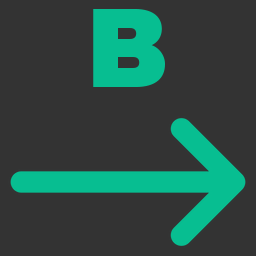
<style>
.page{position:relative;width:256px;height:256px;background:#333333}
.page>*{position:absolute;margin:0}
.t1{font:109.7px "HelveticaNowDisplay-XBlk";color:#07be91}
</style>
<div class="page">
<p class="t1" style="left:93px;top:9px;width:72px;height:78px">B</p>
</div>
